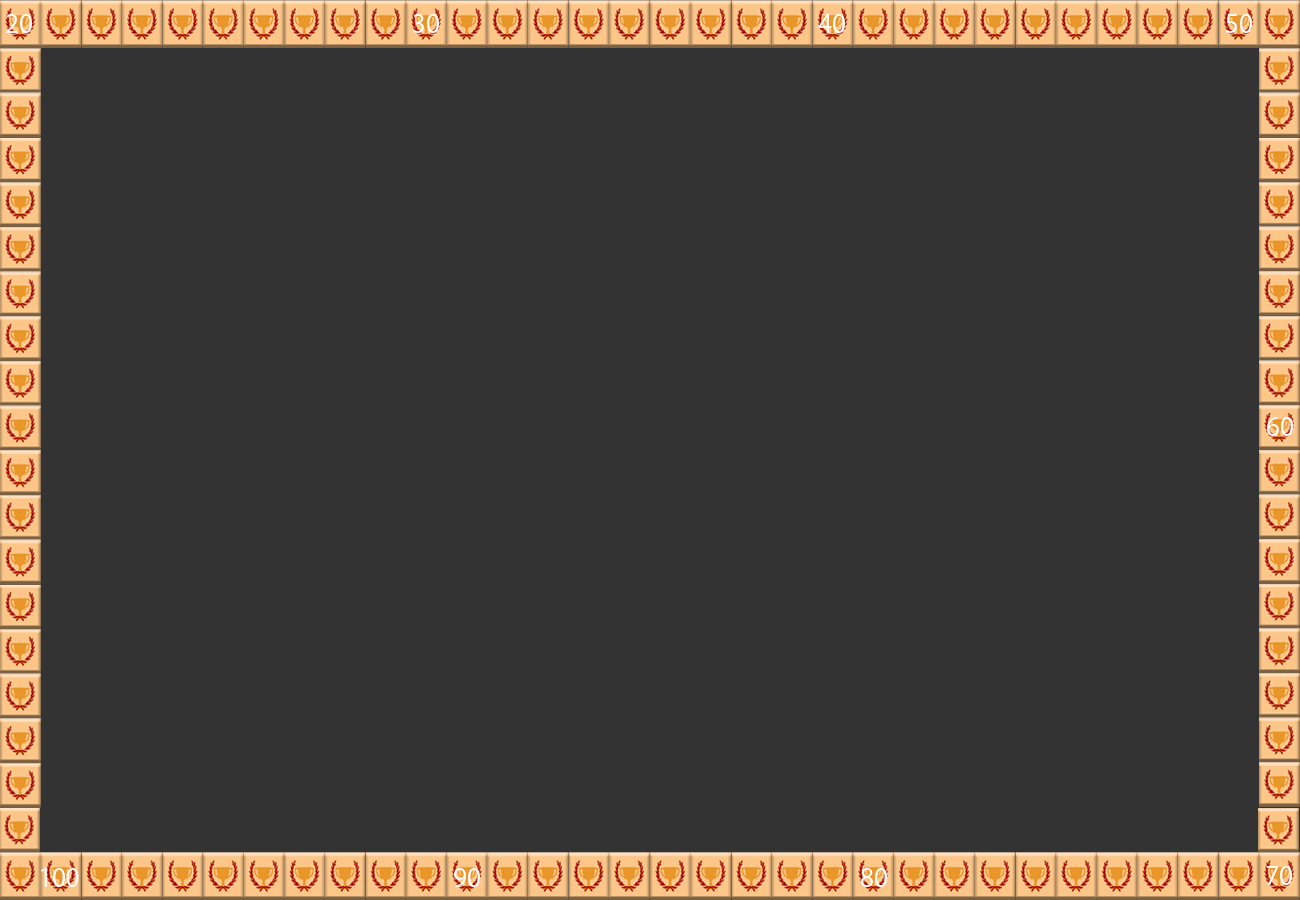
<style>
.page{position:relative;width:1300px;height:900px;background:#333333}
.page>*{position:absolute;margin:0}
.t1{font:12px "KozGoPr6N-Regular";color:#ffffff}
</style>
<div class="page">
<p class="t1" style="left:6px;top:14px;width:26px;height:19px">20</p>
<p class="t1" style="left:413px;top:14px;width:26px;height:19px">30</p>
<p class="t1" style="left:818px;top:14px;width:27px;height:19px">40</p>
<p class="t1" style="left:1226px;top:14px;width:26px;height:19px">50</p>
<p class="t1" style="left:1267px;top:417px;width:26px;height:19px">60</p>
<p class="t1" style="left:41px;top:868px;width:38px;height:19px">100</p>
<p class="t1" style="left:454px;top:868px;width:26px;height:19px">90</p>
<p class="t1" style="left:861px;top:868px;width:26px;height:19px">80</p>
<p class="t1" style="left:1266px;top:866px;width:26px;height:19px">70</p>
</div>
